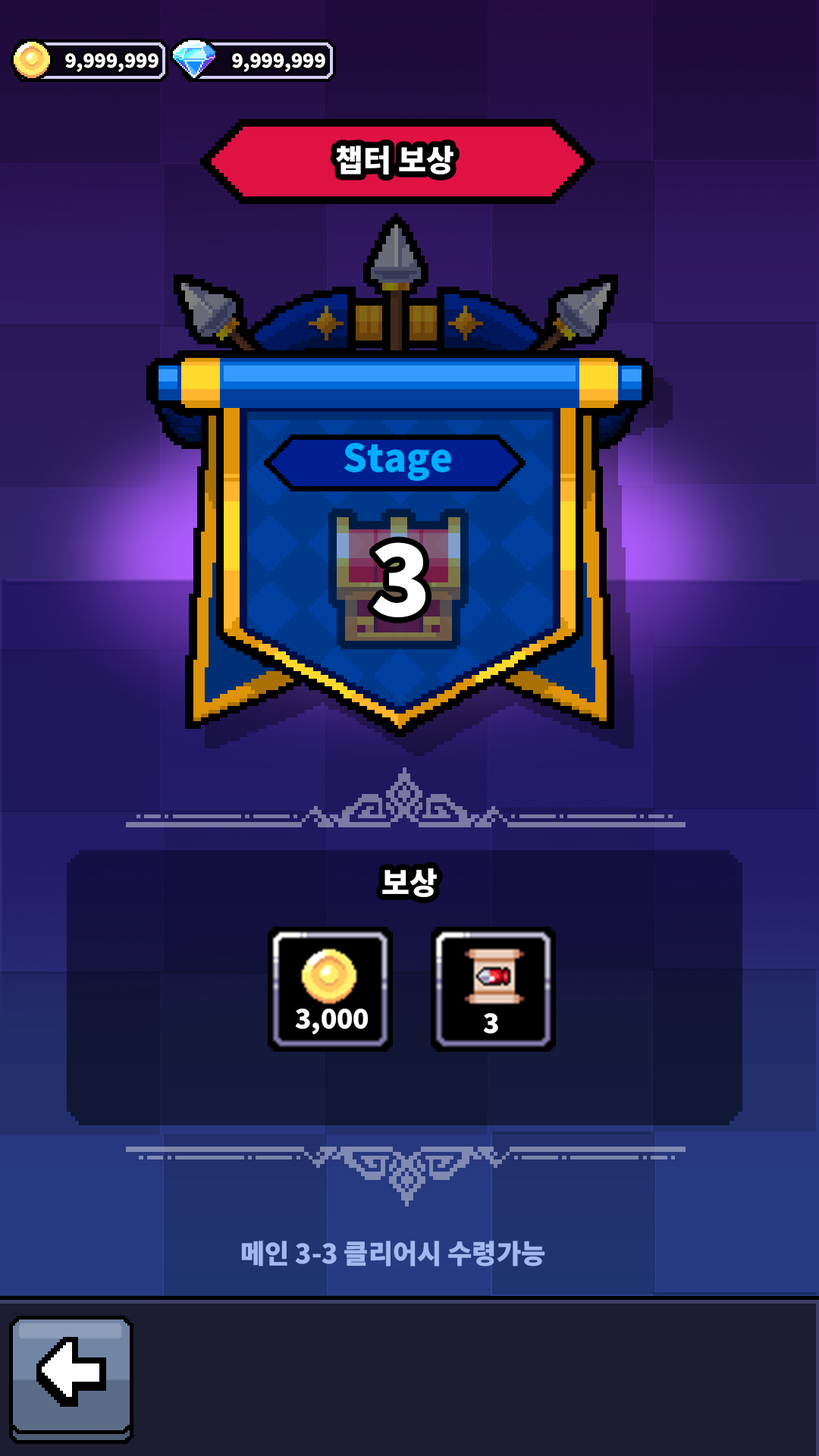
<style>
.page{position:relative;width:819px;height:1456px}
.page>*{position:absolute;margin:0}
.t1{font:19px "NotoSansKR-Black";color:#ffffff}
.t2{font:30.3px "NotoSansKR-Black";color:#ffffff}
.t3{font:37.9px "NotoSansKR-Black";color:#00aeff}
.t4{font:98.6px "NotoSansKR-Black";color:#ffffff}
.t5{font:26.5px "NotoSansKR-Black";color:#ffffff}
.t6{font:26.5px "NotoSansKR-Black";color:#a4b8ef}
</style>
<div class="page">
<p class="t1" style="left:65px;top:53px;width:93px;height:19px">9,999,999</p>
<p class="t1" style="left:232px;top:53px;width:93px;height:19px">9,999,999</p>
<p class="t2" style="left:336px;top:146px;width:117px;height:29px">챕터 보상</p>
<p class="t3" style="left:344px;top:442px;width:107px;height:40px">Stage</p>
<p class="t4" style="left:373px;top:542px;width:53px;height:75px">3</p>
<p class="t2" style="left:382px;top:868px;width:55px;height:29px">보상</p>
<p class="t5" style="left:295px;top:1009px;width:74px;height:25px">3,000</p>
<p class="t5" style="left:483px;top:1013px;width:15px;height:21px">3</p>
<p class="t6" style="left:241px;top:1241px;width:304px;height:25px">메인 3-3 클리어시 수령가능</p>
</div>
